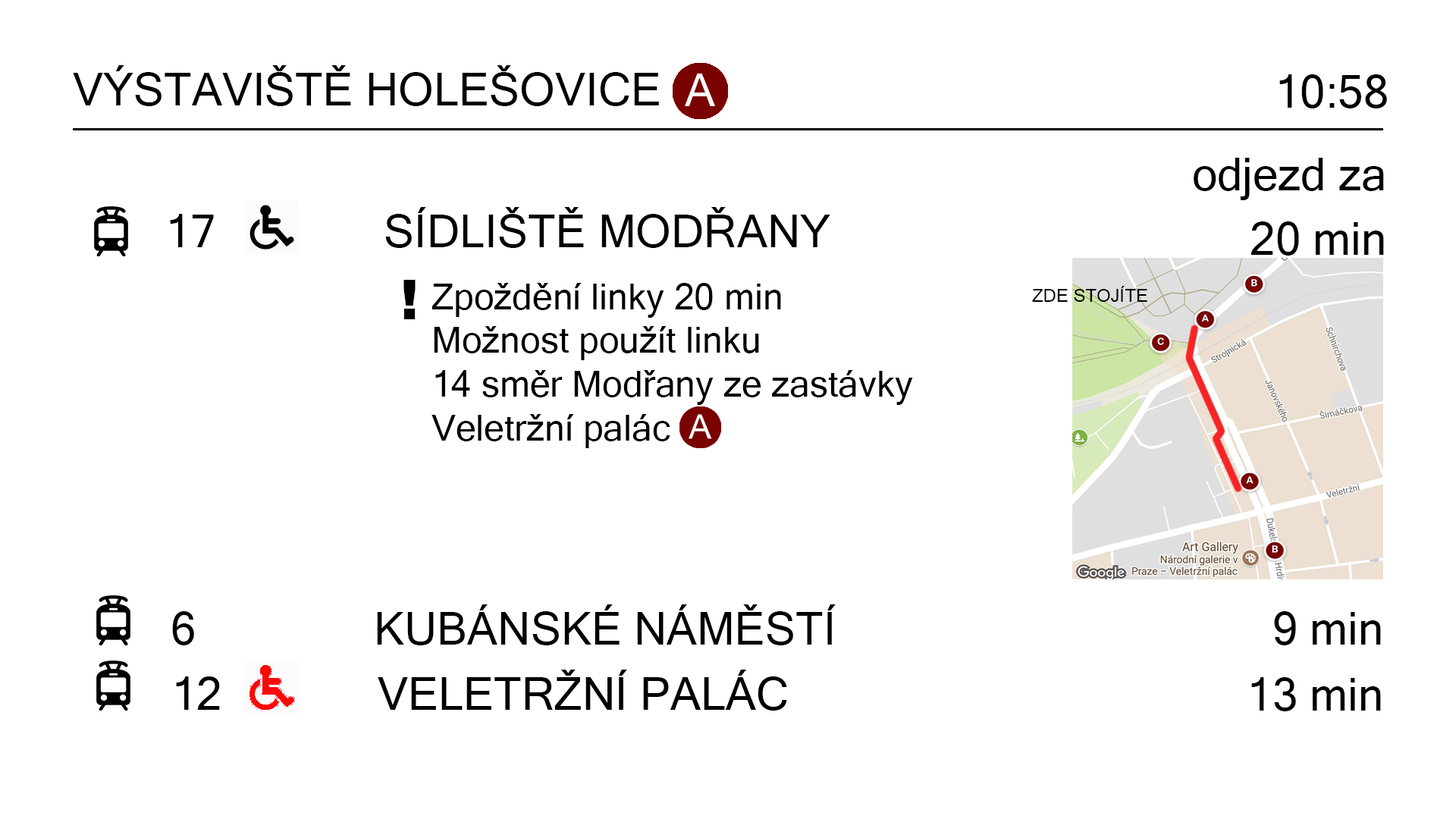
<style>
.page{position:relative;width:1456px;height:819px;background:#ffffff}
.page>*{position:absolute;margin:0}
.t1{font:45.5px "MicrosoftSansSerif";color:#000000}
.t2{font:54.6px "Arial-Black";color:#000000}
.t3{font:36.4px "MicrosoftSansSerif";color:#000000}
.t4{font:18.2px "MicrosoftSansSerif";color:#000000}
</style>
<div class="page">
<p class="t1" style="left:73px;top:65px;width:586px;height:41px">VÝSTAVIŠTĚ HOLEŠOVICE</p>
<p class="t1" style="left:1279px;top:74px;width:108px;height:34px">10:58</p>
<p class="t1" style="left:1194px;top:158px;width:190px;height:42px">odjezd za</p>
<p class="t1" style="left:170px;top:207px;width:660px;height:41px">17       SÍDLIŠTĚ MODŘANY</p>
<p class="t1" style="left:1250px;top:221px;width:134px;height:35px">20 min</p>
<p class="t2" style="left:403px;top:280px;width:13px;height:39px">!</p>
<p class="t3" style="left:431px;top:283px;width:482px;height:165px">Zpoždění linky 20 min<br>Možnost použít linku <br>14 směr Modřany ze zastávky <br>Veletržní palác</p>
<p class="t4" style="left:1032px;top:286px;width:115px;height:16px">ZDE STOJÍTE</p>
<p class="t1" style="left:172px;top:604px;width:664px;height:41px">6        KUBÁNSKÉ NÁMĚSTÍ</p>
<p class="t1" style="left:1274px;top:611px;width:107px;height:34px">9 min</p>
<p class="t1" style="left:1251px;top:677px;width:130px;height:34px">13 min</p>
</div>
